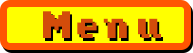
<style>
.page{position:relative;width:193px;height:53px;background:#ffff00}
.page>*{position:absolute;margin:0}
.t1{font:30.4px "PressStartReg";color:#d34c0a}
.t2{font:30.4px "PressStartReg"}
</style>
<div class="page">
<p class="t1" style="left:43px;top:11px;width:118px;height:27px">Menu</p>
<p class="t2" style="left:45px;top:14px;width:118px;height:27px">Menu</p>
</div>
